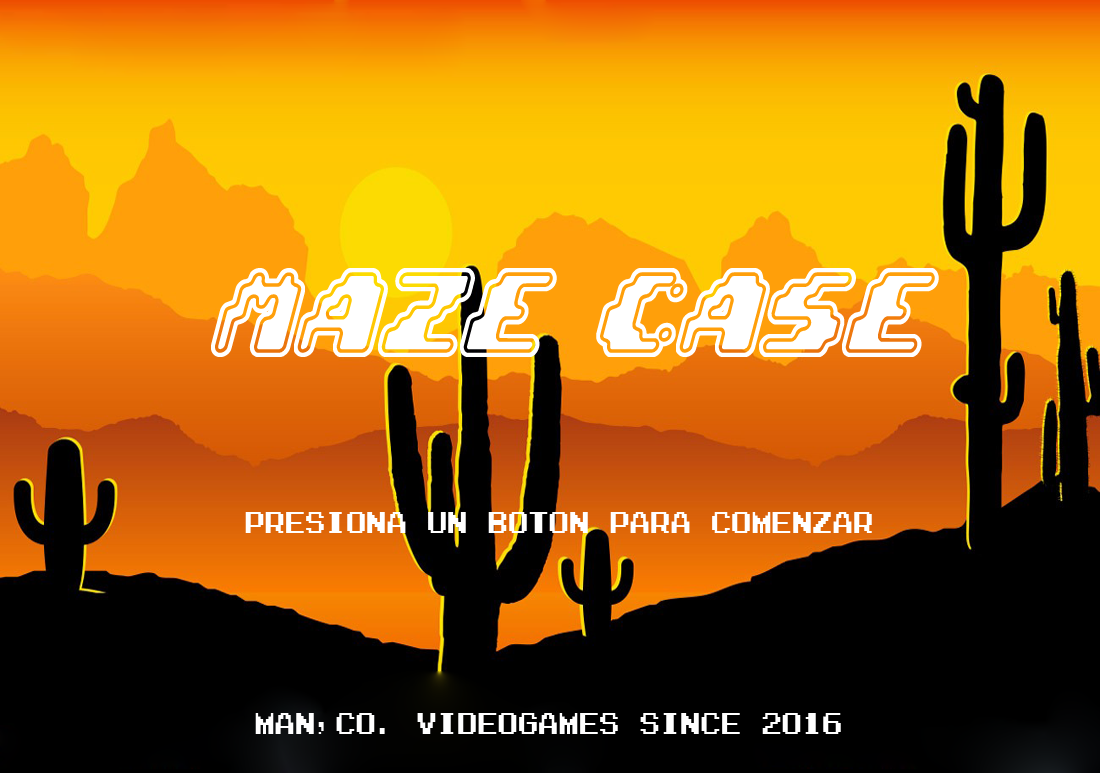
<style>
.page{position:relative;width:1100px;height:773px;background:#000000}
.page>*{position:absolute;margin:0}
.t1{font:115.4px "ZeroVelocityBRK";color:#ffffff;scale:0.88 1}
.t2{font:28.8px "Zig";color:#ffffff;scale:0.88 1}
</style>
<div class="page">
<p class="t1" style="left:211px;top:268px;width:728px;height:89px">maze case</p>
<p class="t2" style="left:245px;top:512px;width:627px;height:21px">PRESIONA UN BOTON PARA COMENZAr</p>
<p class="t2" style="left:255px;top:713px;width:586px;height:21px">Man,Co. VideoGames since 2016</p>
</div>
